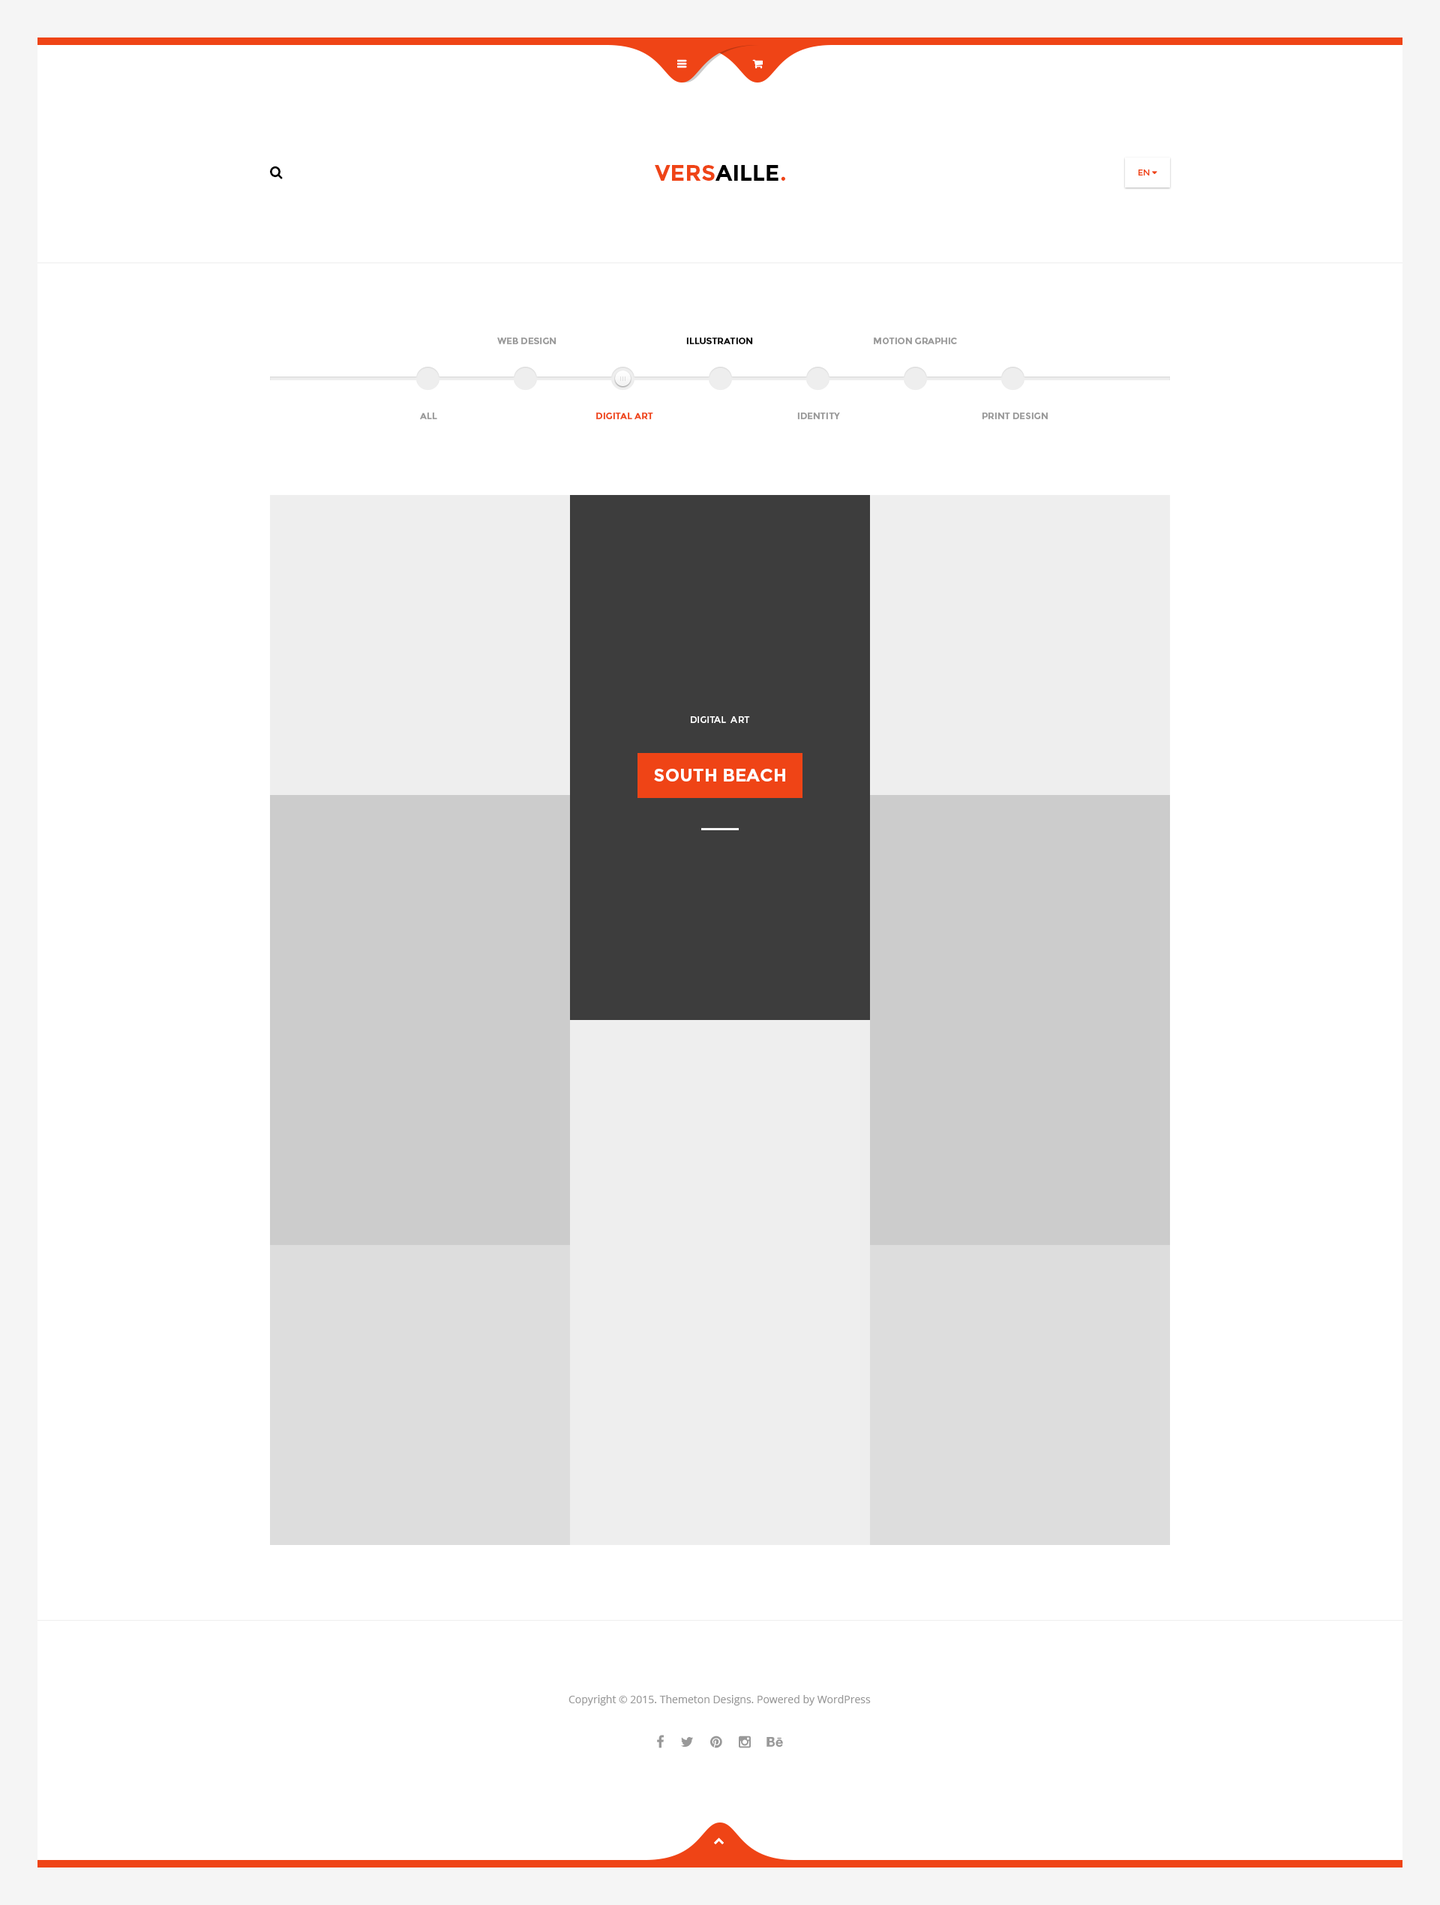
<style>
.page{position:relative;width:1440px;height:1905px;background:#ffffff}
.page>*{position:absolute;margin:0}
.t1{font:22.5px "Montserrat-Bold";color:#000000}
.t2{font:22.5px "Montserrat-Bold";color:#ef4416}
.t3{font:9px "Montserrat-Bold";color:#999999}
.t4{font:9px "Montserrat-Bold";color:#000000}
.t5{font:9px "Montserrat-Bold";color:#ef4416}
.t6{font:9px "Montserrat-Regular";color:#ffffff}
.t7{font:18px "Montserrat-Bold";color:#ffffff}
.t8{font:10.5px "OpenSans";color:#999999}
</style>
<div class="page">
<p class="t1" style="left:655px;top:165px;width:130px;height:16px"><span class="t2">VERS</span>AILLE<span class="t2">.</span></p>
<p class="t3" style="left:497px;top:338px;width:59px;height:6px">WEB DESIGN</p>
<p class="t4" style="left:686px;top:338px;width:67px;height:6px">ILLUSTRATION</p>
<p class="t3" style="left:874px;top:338px;width:83px;height:6px">MOTION GRAPHIC</p>
<p class="t3" style="left:420px;top:412px;width:17px;height:7px">ALL</p>
<p class="t5" style="left:596px;top:412px;width:57px;height:7px">DIGITAL ART</p>
<p class="t3" style="left:797px;top:412px;width:43px;height:7px">IDENTITY</p>
<p class="t3" style="left:982px;top:412px;width:66px;height:7px">PRINT DESIGN</p>
<p class="t6" style="left:691px;top:716px;width:59px;height:7px">DIGITAL  ART</p>
<p class="t7" style="left:654px;top:769px;width:131px;height:13px">SOUTH BEACH</p>
<p class="t8" style="left:568px;top:1695px;width:303px;height:11px">Copyright © 2015. Themeton Designs. Powered by WordPress</p>
</div>
